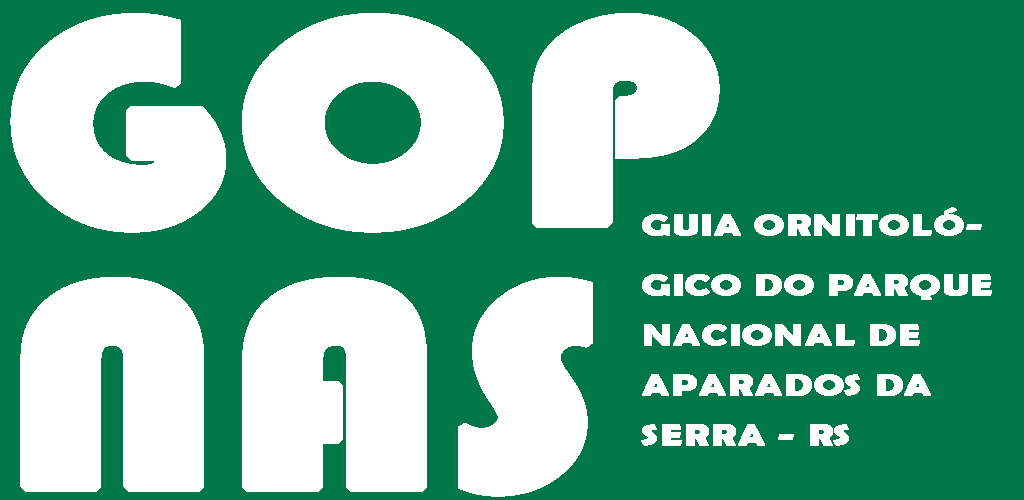
<style>
.page{position:relative;width:1024px;height:500px;background:#007749}
.page>*{position:absolute;margin:0}
.t1{font:300px/264px "Bauhaus93";color:#ffffff;font-weight:bold;scale:1.2 1}
.t2{font:30px/50px "BerlinSansFBDemi-Bold";color:#ffffff;font-weight:bold;scale:1.35 1}
.t3{font:30px/60px "BerlinSansFBDemi-Bold";color:#ffffff;font-weight:bold;scale:1.35 1}
</style>
<div class="page">
<p class="t1" style="left:10px;top:13px;width:710px;height:484px">GOP<br>NAS</p>
<p class="t2" style="left:641px;top:207px;width:351px;height:239px"><span class="t3">GUIA ORNITOLÓ-<br>GICO DO </span>PARQUE<br>NACIONAL DE<br>APARADOS DA <br>SERRA - RS</p>
</div>
